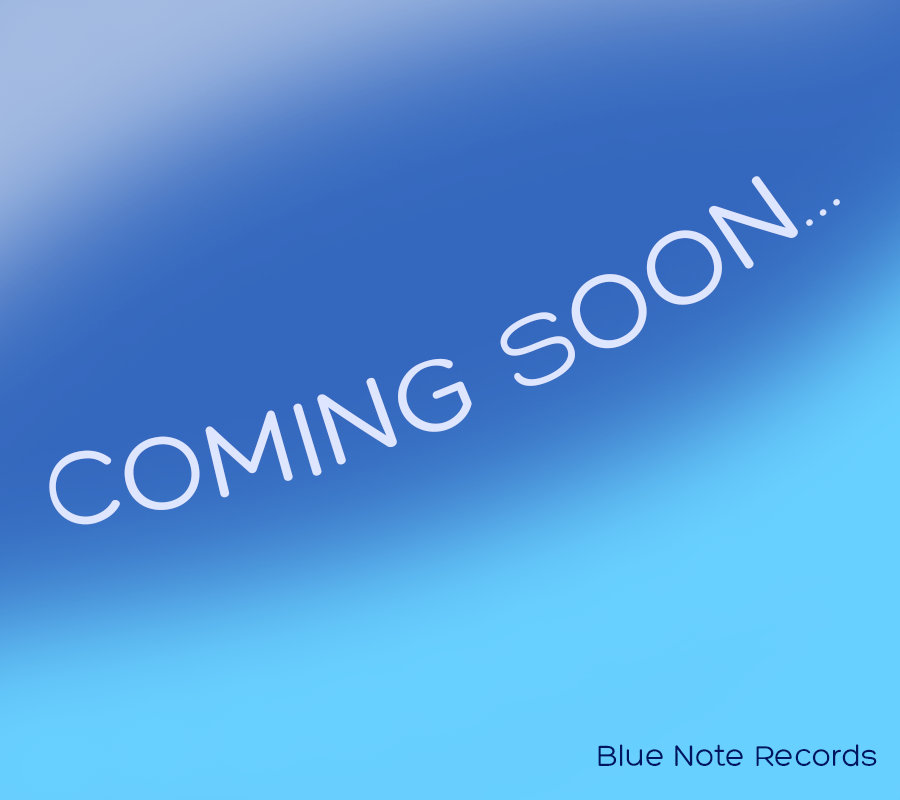
<style>
.page{position:relative;width:900px;height:800px}
.page>*{position:absolute;margin:0}
.t1{font:111.2px "Hero";color:#dee5ff}
.t2{font:31.8px "Hero";color:#001561}
</style>
<div class="page">
<p class="t1" style="left:49px;top:176px;width:791px;height:349px;rotate:-22deg">COMING SOON...</p>
<p class="t2" style="left:598px;top:744px;width:279px;height:23px">Blue Note Records</p>
</div>
